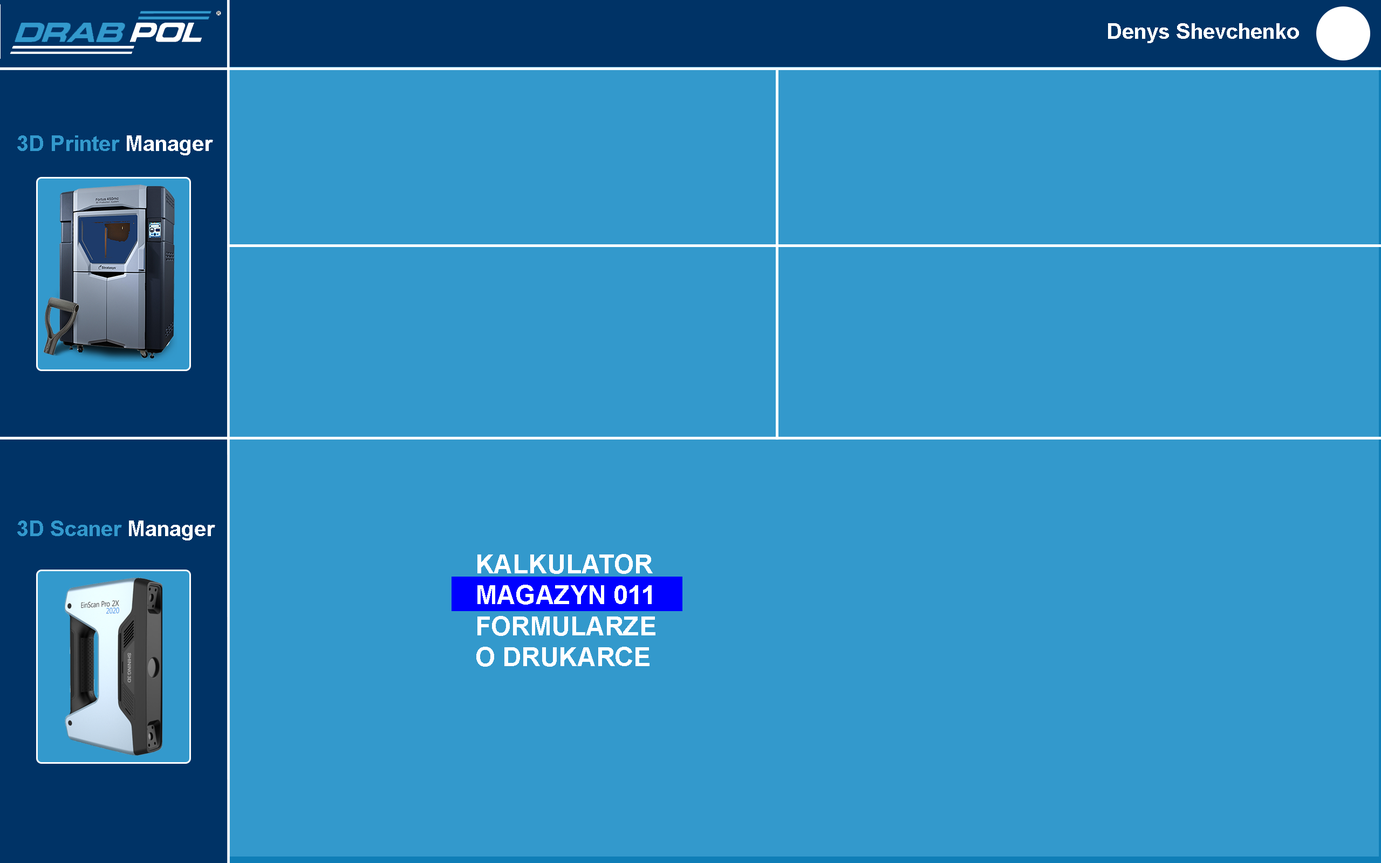
<style>
.page{position:relative;width:1381px;height:863px;background:#3399cc}
.page>*{position:absolute;margin:0}
.t1{font:21.6px "Arial-BoldMT";color:#ffffff}
.t2{font:21.6px "Arial-BoldMT";color:#3399cc}
.t3{font:25.9px "Arial-BoldMT";color:#ffffff;text-transform:uppercase}
</style>
<div class="page">
<p class="t1" style="left:1108px;top:23px;width:191px;height:20px">Denys Shevchenko</p>
<p class="t2" style="left:17px;top:135px;width:196px;height:20px">3D Printer <span class="t1">Manager</span></p>
<p class="t2" style="left:17px;top:521px;width:198px;height:20px">3D Scaner<span class="t1"> Manager</span></p>
<p class="t3" style="left:476px;top:554px;width:180px;height:113px">Kalkulator<br>Magazyn 011<br>Formularze<br>O drukarce</p>
</div>
